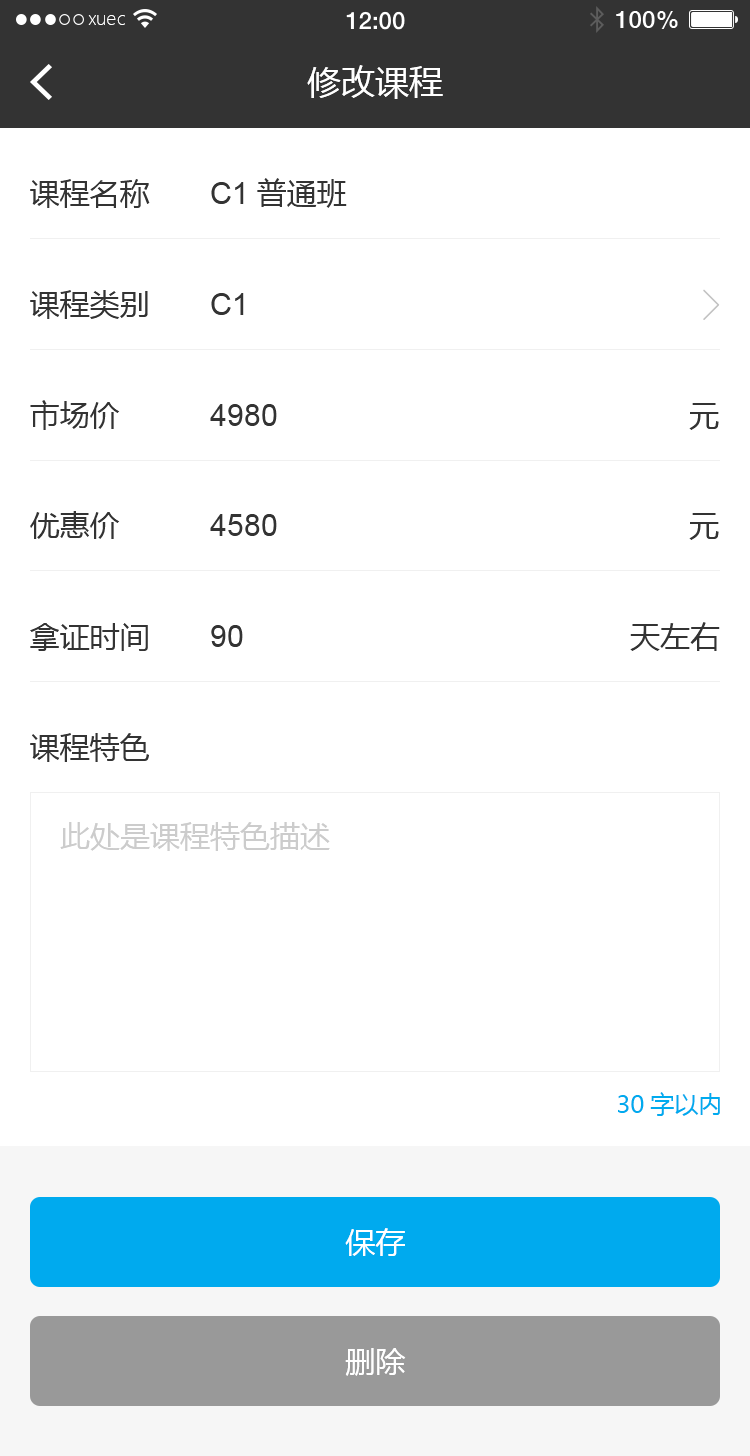
<style>
.page{position:relative;width:750px;height:1456px;background:#ffffff}
.page>*{position:absolute;margin:0}
.t1{font:18px "MicrosoftYaHeiLight";color:#ffffff}
.t2{font:34px "MicrosoftYaHei";color:#ffffff}
.t3{font:30px "MicrosoftYaHei";color:#333333}
.t4{font:30px "ArialMT";color:#333333}
.t5{font:30px "MicrosoftYaHei";color:#cccccc}
.t6{font:24px "MicrosoftYaHei";color:#00aaee}
.t7{font:30px "MicrosoftYaHei";color:#ffffff}
</style>
<div class="page">
<p class="t1" style="left:88px;top:15px;width:37px;height:10px">xuec</p>
<p class="t2" style="left:307px;top:65px;width:136px;height:34px">修改课程</p>
<p class="t3" style="left:30px;top:179px;width:120px;height:29px">课程名称</p>
<p class="t3" style="left:211px;top:178px;width:136px;height:30px"><span class="t4">C1</span>普通班</p>
<p class="t3" style="left:30px;top:290px;width:118px;height:29px">课程类别</p>
<p class="t4" style="left:211px;top:293px;width:33px;height:22px">C1</p>
<p class="t3" style="left:30px;top:400px;width:90px;height:30px">市场价</p>
<p class="t4" style="left:210px;top:404px;width:67px;height:22px">4980</p>
<p class="t3" style="left:689px;top:403px;width:30px;height:27px">元</p>
<p class="t3" style="left:30px;top:511px;width:90px;height:28px">优惠价</p>
<p class="t4" style="left:210px;top:514px;width:67px;height:22px">4580</p>
<p class="t3" style="left:689px;top:513px;width:30px;height:27px">元</p>
<p class="t3" style="left:30px;top:623px;width:118px;height:28px">拿证时间</p>
<p class="t4" style="left:211px;top:625px;width:32px;height:22px">90</p>
<p class="t3" style="left:630px;top:622px;width:90px;height:29px">天左右</p>
<p class="t3" style="left:30px;top:733px;width:119px;height:29px">课程特色</p>
<p class="t5" style="left:60px;top:822px;width:270px;height:29px">此处是课程特色描述</p>
<p class="t6" style="left:618px;top:1092px;width:102px;height:24px">30字以内</p>
<p class="t7" style="left:345px;top:1228px;width:60px;height:28px">保存</p>
<p class="t7" style="left:345px;top:1348px;width:61px;height:28px">删除</p>
</div>
